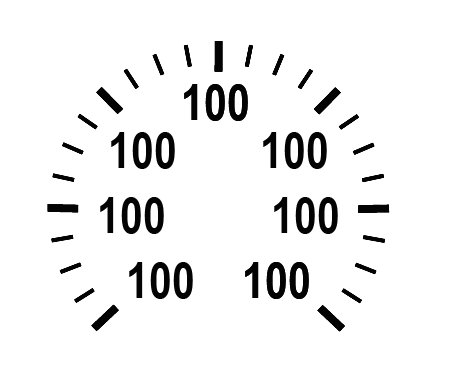
<style>
.page{position:relative;width:457px;height:372px;background:#ffffff}
.page>*{position:absolute;margin:0}
.t1{font:50px "ArialNarrow-Bold";color:#030303}
</style>
<div class="page">
<p class="t1" style="left:184px;top:84px;width:64px;height:37px">100</p>
<p class="t1" style="left:184px;top:84px;width:64px;height:37px">100</p>
<p class="t1" style="left:111px;top:132px;width:64px;height:37px">100</p>
<p class="t1" style="left:263px;top:132px;width:64px;height:37px">100</p>
<p class="t1" style="left:100px;top:197px;width:64px;height:37px">100</p>
<p class="t1" style="left:274px;top:197px;width:64px;height:37px">100</p>
<p class="t1" style="left:129px;top:262px;width:64px;height:37px">100</p>
<p class="t1" style="left:245px;top:262px;width:64px;height:37px">100</p>
<p class="t1" style="left:245px;top:262px;width:64px;height:37px">100</p>
</div>
